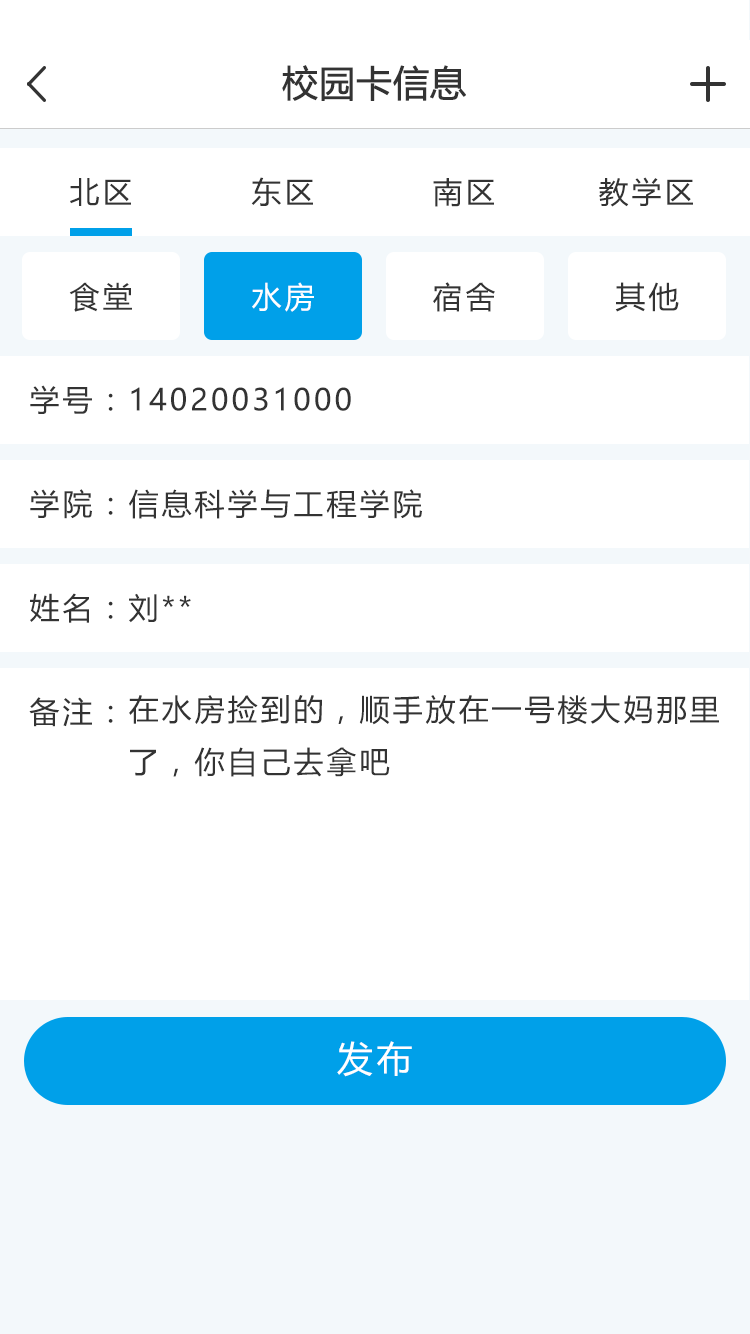
<style>
.page{position:relative;width:750px;height:1334px;background:#ffffff}
.page>*{position:absolute;margin:0}
.t1{font:36px "MicrosoftYaHei";color:#333333;font-weight:bold}
.t2{font:30px "MicrosoftYaHei";letter-spacing:0.1em;color:#333333}
.t3{font:30px "MicrosoftYaHei";letter-spacing:0.1em;color:#ffffff}
.t4{font:36px "MicrosoftYaHei";letter-spacing:0.1em;color:#ffffff}
</style>
<div class="page">
<p class="t1" style="left:282px;top:65px;width:184px;height:36px">校园卡信息</p>
<p class="t2" style="left:70px;top:178px;width:61px;height:28px">北区</p>
<p class="t2" style="left:251px;top:177px;width:62px;height:29px">东区</p>
<p class="t2" style="left:433px;top:178px;width:61px;height:29px">南区</p>
<p class="t2" style="left:599px;top:177px;width:94px;height:30px">教学区</p>
<p class="t2" style="left:69px;top:282px;width:63px;height:30px">食堂</p>
<p class="t3" style="left:252px;top:282px;width:62px;height:30px">水房</p>
<p class="t2" style="left:433px;top:282px;width:62px;height:30px">宿舍</p>
<p class="t2" style="left:615px;top:282px;width:64px;height:30px">其他</p>
<p class="t2" style="left:30px;top:385px;width:321px;height:29px">学号：14020031000</p>
<p class="t2" style="left:30px;top:489px;width:392px;height:30px">学院：信息科学与工程学院</p>
<p class="t2" style="left:30px;top:593px;width:161px;height:30px">姓名：刘**</p>
<p class="t2" style="left:29px;top:697px;width:84px;height:30px">备注：</p>
<p class="t2" style="left:129px;top:695px;width:590px;height:82px">在水房捡到的，顺手放在一号楼大妈那里了，你自己去拿吧</p>
<p class="t4" style="left:337px;top:1041px;width:75px;height:36px">发布</p>
</div>
